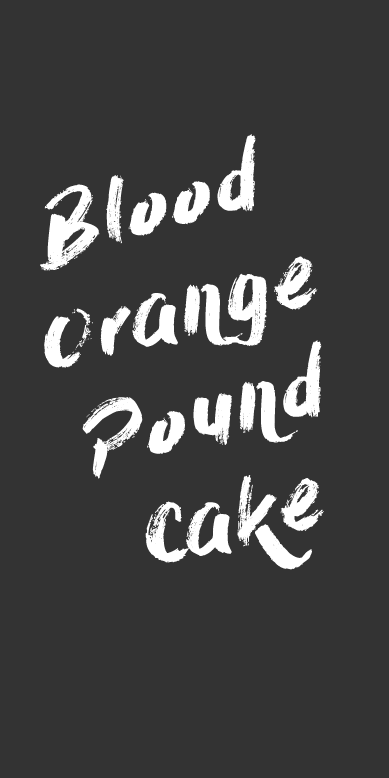
<style>
.page{position:relative;width:389px;height:778px;background:#333333}
.page>*{position:absolute;margin:0}
.t1{font:90px "DryBrush";color:#ffffff;font-style:italic}
</style>
<div class="page">
<p class="t1" style="left:40px;top:134px;width:284px;height:436px;text-align:center;rotate:-15deg">Blood<br>Orange<br>Pound Cake</p>
</div>
